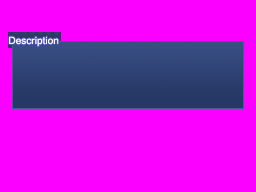
<style>
.page{position:relative;width:256px;height:192px;background:#fc00ff}
.page>*{position:absolute;margin:0}
.t1{font:16px "Kartika";color:#ffffff}
</style>
<div class="page">
<p class="t1" style="left:9px;top:36px;width:50px;height:11px">Description</p>
</div>
